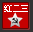
<style>
.page{position:relative;width:33px;height:32px;background:#c50000}
.page>*{position:absolute;margin:0}
.t1{font:10.4px "SimSun";letter-spacing:-0.25em;color:#ffffff}
</style>
<div class="page">
<p class="t1" style="left:4px;top:5px;width:24px;height:7px">红二三</p>
</div>
